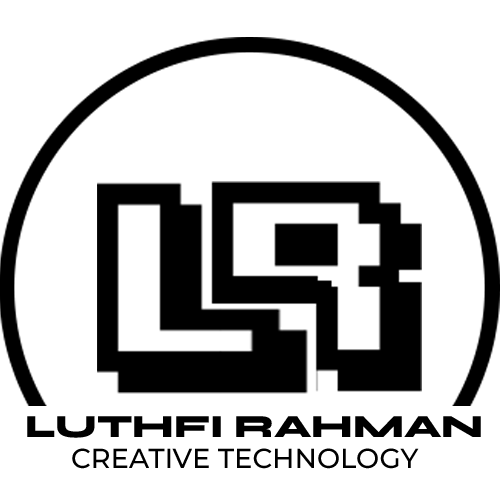
<style>
.page{position:relative;width:500px;height:500px;background:#ffffff}
.page>*{position:absolute;margin:0}
.t1{font:32.4px "Syne-ExtraBold";color:#000000}
.t2{font:27.6px "Montserrat-Medium";color:#000000}
</style>
<div class="page">
<p class="t1" style="left:27px;top:416px;width:454px;height:22px">LUTHFI RAHMAN</p>
<p class="t2" style="left:72px;top:448px;width:347px;height:21px">CREATIVE TECHNOLOGY</p>
</div>
